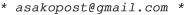
<style>
.page{position:relative;width:187px;height:15px;background:#ffffff}
.page>*{position:absolute;margin:0}
.t1{font:12.8px "CourierNewPS-ItalicMT";color:#333333;font-weight:bold}
</style>
<div class="page">
<p class="t1" style="left:1px;top:2px;width:183px;height:12px">* asakopost@gmail.com *</p>
</div>
